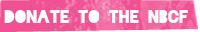
<style>
.page{position:relative;width:200px;height:32px;background:#ffffff}
.page>*{position:absolute;margin:0}
.t1{font:18px "Blackout-Midnight";color:#ffffff}
</style>
<div class="page">
<p class="t1" style="left:4px;top:10px;width:184px;height:13px">Donate to the NBCF</p>
</div>
